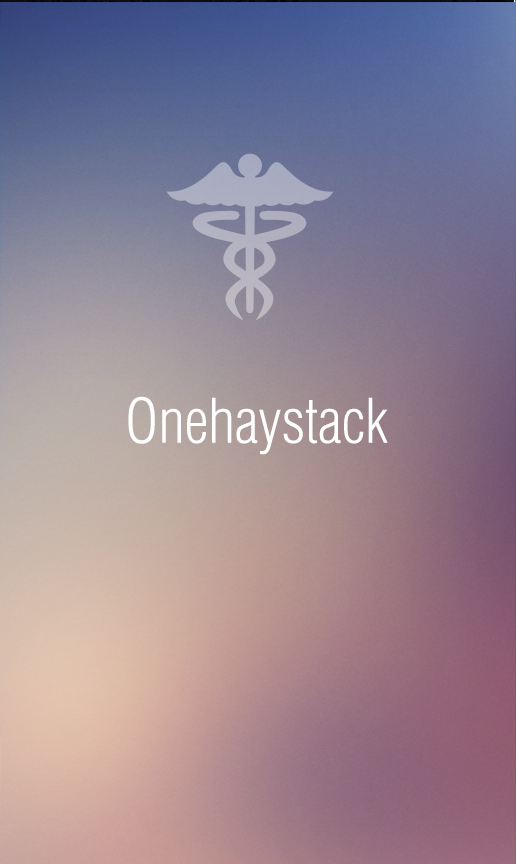
<style>
.page{position:relative;width:516px;height:864px}
.page>*{position:absolute;margin:0}
.t1{font:60px "HelveticaLT-Condensed-Light";color:#ffffff}
</style>
<div class="page">
<p class="t1" style="left:128px;top:396px;width:260px;height:59px">Onehaystack</p>
</div>
